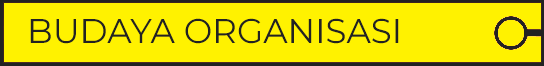
<style>
.page{position:relative;width:544px;height:66px;background:#fff200}
.page>*{position:absolute;margin:0}
.t1{font:34.2px "Montserrat-Regular";color:#222222}
</style>
<div class="page">
<p class="t1" style="left:30px;top:18px;width:369px;height:26px">BUDAYA ORGANISASI</p>
</div>
